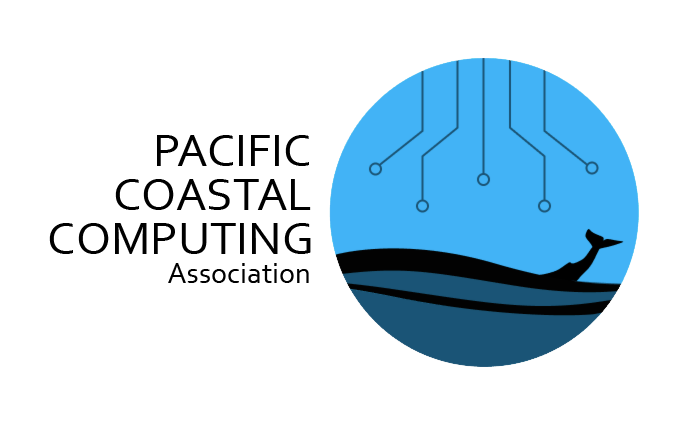
<style>
.page{position:relative;width:696px;height:433px;background:#ffffff}
.page>*{position:absolute;margin:0}
.t1{font:48px "Corbel";color:#000000}
.t2{font:30px "Corbel";color:#000000}
</style>
<div class="page">
<p class="t1" style="left:157px;top:135px;width:152px;height:31px">PACIFIC</p>
<p class="t1" style="left:115px;top:179px;width:196px;height:31px">COASTAL</p>
<p class="t1" style="left:49px;top:223px;width:262px;height:31px">COMPUTING</p>
<p class="t2" style="left:168px;top:263px;width:141px;height:20px">Association</p>
</div>
